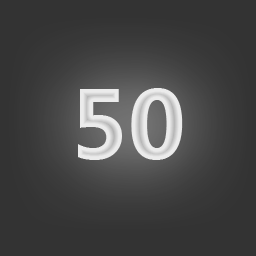
<style>
.page{position:relative;width:256px;height:256px;background:#333333}
.page>*{position:absolute;margin:0}
.t1{font:100px "MicrosoftTaiLe-Bold";color:#ebebeb}
</style>
<div class="page">
<p class="t1" style="left:78px;top:88px;width:105px;height:72px">50</p>
</div>
